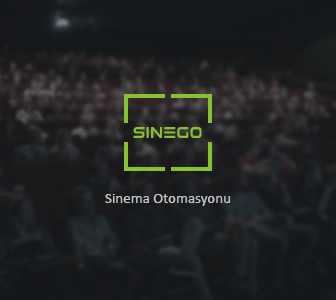
<style>
.page{position:relative;width:336px;height:300px}
.page>*{position:absolute;margin:0}
.t1{font:15px "Calibri";color:#c5c6c7}
</style>
<div class="page">
<p class="t1" style="left:105px;top:194px;width:125px;height:12px">Sinema Otomasyonu</p>
</div>
